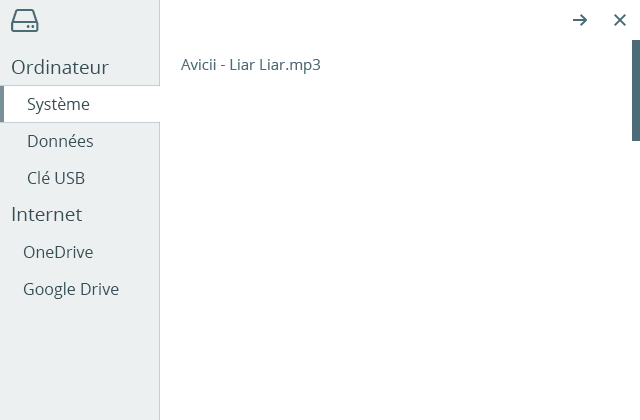
<style>
.page{position:relative;width:640px;height:420px;background:#ffffff}
.page>*{position:absolute;margin:0}
.t1{font:19px "OpenSans";color:#364e55}
.t2{font:15px "OpenSans";color:#4b6c75}
.t3{font:16px "OpenSans";color:#364e55}
</style>
<div class="page">
<p class="t1" style="left:12px;top:59px;width:97px;height:15px">Ordinateur</p>
<p class="t2" style="left:181px;top:59px;width:139px;height:15px">Avicii - Liar Liar.mp3</p>
<p class="t3" style="left:27px;top:97px;width:63px;height:17px">Système</p>
<p class="t3" style="left:28px;top:134px;width:65px;height:13px">Données</p>
<p class="t3" style="left:27px;top:171px;width:58px;height:13px">Clé USB</p>
<p class="t1" style="left:12px;top:207px;width:70px;height:14px">Internet</p>
<p class="t3" style="left:23px;top:246px;width:70px;height:12px">OneDrive</p>
<p class="t3" style="left:23px;top:282px;width:96px;height:17px">Google Drive</p>
</div>
